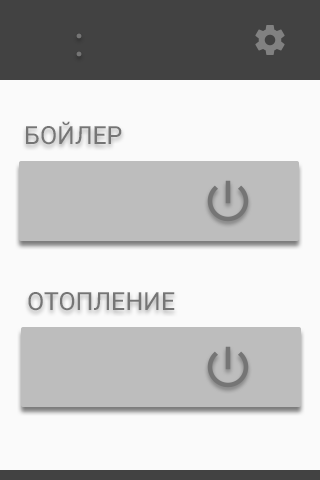
<style>
.page{position:relative;width:320px;height:480px;background:#fafafa}
.page>*{position:absolute;margin:0}
.t1{font:41.7px "Roboto-Regular";color:#757575}
.t2{font:25px "Roboto-Regular";color:#757575}
</style>
<div class="page">
<p class="t1" style="left:76px;top:33px;width:6px;height:24px">:</p>
<p class="t2" style="left:26px;top:121px;width:96px;height:24px">БОЙЛЕР</p>
<p class="t2" style="left:28px;top:292px;width:147px;height:19px">ОТОПЛЕНИЕ</p>
</div>
